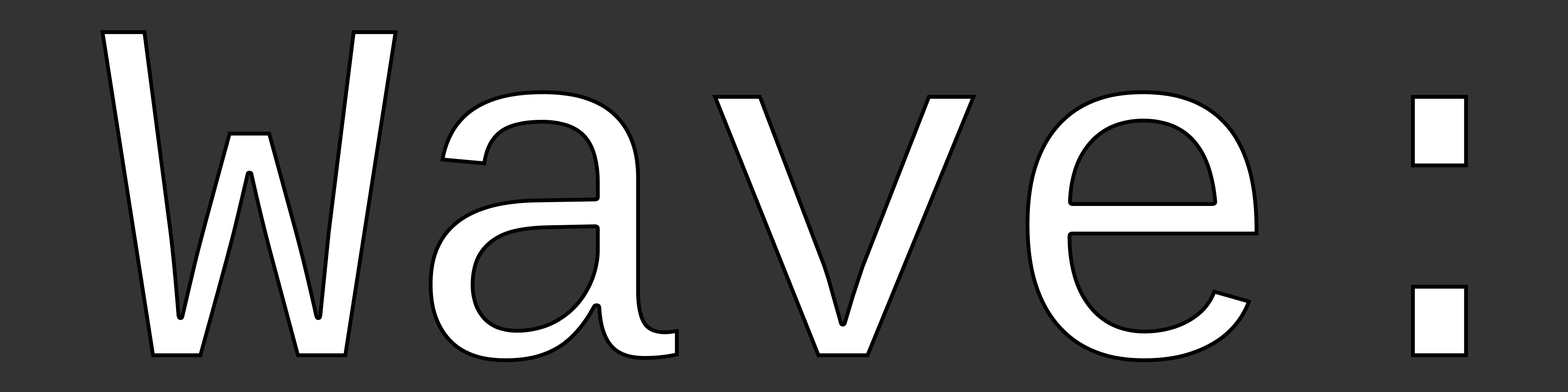
<style>
.page{position:relative;width:1568px;height:392px;background:#333333}
.page>*{position:absolute;margin:0}
.t1{font:496.1px "LiberationMono";color:#ffffff}
</style>
<div class="page">
<p class="t1" style="left:100px;top:30px;width:1368px;height:332px">Wave:</p>
</div>
